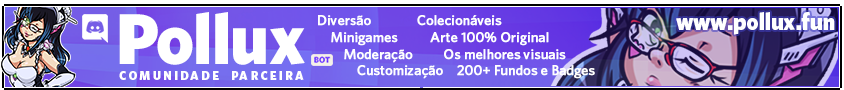
<style>
.page{position:relative;width:844px;height:90px}
.page>*{position:absolute;margin:0}
.t1{font:72px "WhitneyHTF-Black";letter-spacing:-0.01em;color:#ffffff}
.t2{font:14px "WhitneyHTF-Medium";letter-spacing:-0.01em;color:#ffffff;font-weight:bold}
.t3{font:24.1px "WhitneyHTF-Black";letter-spacing:-0.01em;color:#ffffff}
.t4{font:12px "WhitneyHTF-Black";letter-spacing:0.2em;color:#ffffff}
</style>
<div class="page">
<p class="t1" style="left:119px;top:12px;width:186px;height:53px">Pollux</p>
<p class="t2" style="left:318px;top:15px;width:125px;height:64px;text-align:right">Diversão<br>    Minigames<br>        Moderação  <br>            Customização</p>
<p class="t2" style="left:417px;top:15px;width:178px;height:64px;text-align:right">Colecionáveis<br>    Arte 100% Original<br>        Os melhores visuais  <br>            200+ Fundos e Badges</p>
<p class="t3" style="left:676px;top:12px;width:159px;height:23px">www.pollux.fun</p>
<p class="t4" style="left:119px;top:71px;width:185px;height:9px">COMUNIDADE  PARCEIRA</p>
</div>
